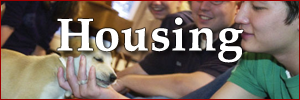
<style>
.page{position:relative;width:300px;height:100px}
.page>*{position:absolute;margin:0}
.t1{font:46.1px "BookAntiqua-Bold";color:#ffffff;font-weight:bold}
</style>
<div class="page">
<p class="t1" style="left:57px;top:17px;width:187px;height:46px">Housing</p>
</div>
